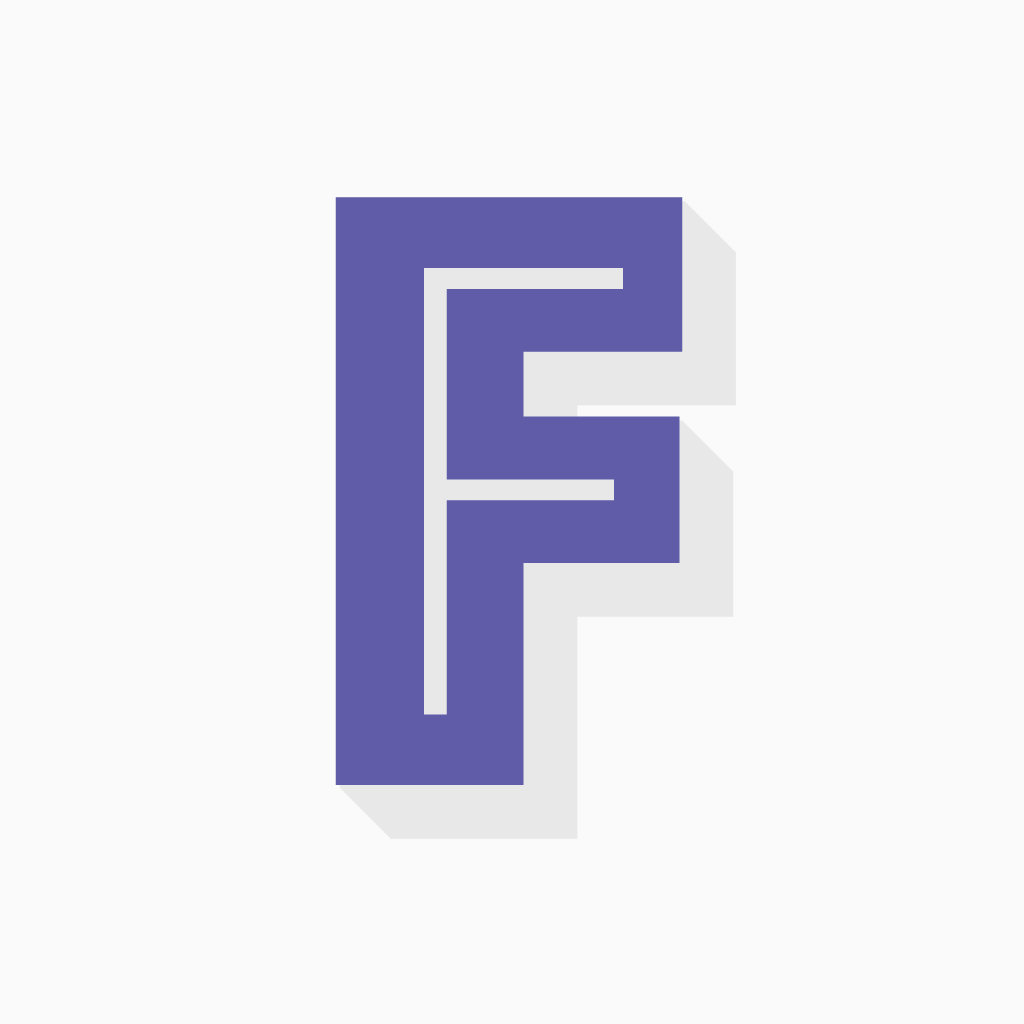
<style>
.page{position:relative;width:1024px;height:1024px;background:#fafafa}
.page>*{position:absolute;margin:0}
.t1{font:880.6px "Phosphate-Inline";color:#605ca8}
</style>
<div class="page">
<p class="t1" style="left:335px;top:197px;width:348px;height:588px">F</p>
</div>
